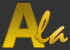
<style>
.page{position:relative;width:70px;height:50px;background:#333333}
.page>*{position:absolute;margin:0}
.t1{font:60px "OpenSans-Bold"}
.t2{font:48px "Mistral"}
</style>
<div class="page">
<p class="t1" style="left:3px;top:4px;width:42px;height:43px">A</p>
<p class="t2" style="left:35px;top:10px;width:33px;height:35px">la</p>
</div>
